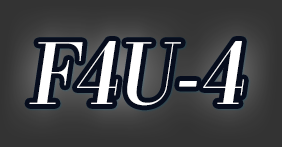
<style>
.page{position:relative;width:282px;height:147px}
.page>*{position:absolute;margin:0}
.t1{font:84px "KochoStd-Heavy";letter-spacing:0.01em;color:#ffffff;font-style:italic;scale:0.83 1}
</style>
<div class="page">
<p class="t1" style="left:29px;top:41px;width:215px;height:65px">F4U-4</p>
</div>
